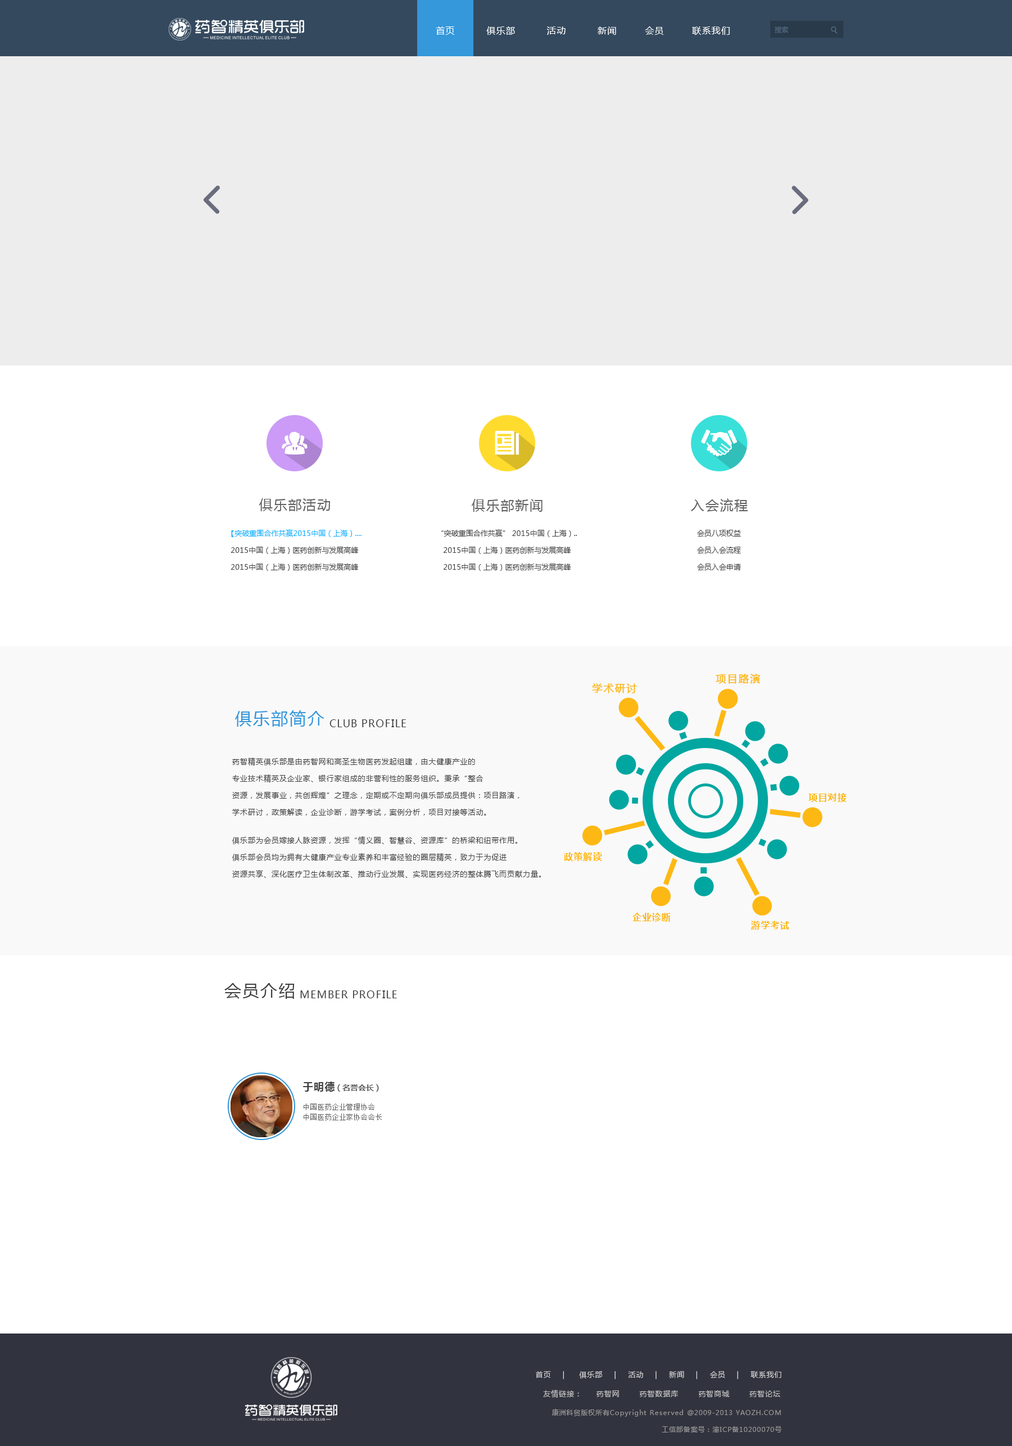
<style>
.page{position:relative;width:1012px;height:1446px;background:#ffffff}
.page>*{position:absolute;margin:0}
.t1{font:9px "MicrosoftYaHei";letter-spacing:0.075em;color:#ffffff}
.t2{font:6.8px "MicrosoftYaHei";color:#526a82}
.t3{font:13.5px "MicrosoftYaHei";letter-spacing:0.075em;color:#626262}
.t4{font:7.3px/16.9px "MicrosoftYaHei";color:#404040}
.t5{font:7.3px/16.9px "MicrosoftYaHei";color:#00aeff}
.t6{font:10.1px "MicrosoftYaHei";letter-spacing:0.075em;color:#fdb813;font-weight:bold}
.t7{font:16.9px "MicrosoftYaHei";letter-spacing:0.075em;color:#3498db}
.t8{font:10.1px "MicrosoftYaHei";letter-spacing:0.075em;color:#404040}
.t9{font:7.3px/16.9px "MicrosoftYaHei";letter-spacing:0.075em;color:#404040}
.t10{font:9px "MicrosoftYaHei-Bold";letter-spacing:0.075em;color:#fdb813}
.t11{font:16.9px "MicrosoftYaHei";letter-spacing:0.075em;color:#404040}
.t12{font:10.1px "MicrosoftYaHei-Bold";letter-spacing:0.075em;color:#404040}
.t13{font:7.9px "MicrosoftYaHei-Bold";color:#606060}
.t14{font:6.8px/10.1px "SimSun";letter-spacing:0.075em;color:#606060}
.t15{font:7.3px "MicrosoftYaHei";letter-spacing:0.075em;color:#d6d6d6}
.t16{font:7.3px "MicrosoftYaHei";letter-spacing:0.075em;color:#c2c2c2}
.t17{font:6.8px/16.9px "MicrosoftYaHei";letter-spacing:0.075em;color:#989898}
</style>
<div class="page">
<p class="t1" style="left:436px;top:26px;width:294px;height:9px">首页         俱乐部         活动         新闻        会员        联系我们</p>
<p class="t2" style="left:775px;top:26px;width:14px;height:7px">搜索</p>
<p class="t3" style="left:259px;top:498px;width:71px;height:13px">俱乐部活动</p>
<p class="t3" style="left:472px;top:499px;width:71px;height:13px">俱乐部新闻</p>
<p class="t3" style="left:691px;top:498px;width:57px;height:14px">入会流程</p>
<p class="t4" style="left:231px;top:529px;width:131px;height:42px;text-align:center"><span class="t5">【突破重围合作共赢2015中国（上海）....<br></span>2015中国（上海）医药创新与发展高峰<br>2015中国（上海）医药创新与发展高峰</p>
<p class="t4" style="left:442px;top:529px;width:135px;height:42px;text-align:center">“突破重围合作共赢” 2015中国（上海）..<br>2015中国（上海）医药创新与发展高峰<br>2015中国（上海）医药创新与发展高峰</p>
<p class="t4" style="left:698px;top:530px;width:43px;height:40px;text-align:center">会员八项权益<br>会员入会流程<br>会员入会申请</p>
<p class="t6" style="left:716px;top:674px;width:44px;height:10px">项目路演</p>
<p class="t6" style="left:592px;top:683px;width:45px;height:11px">学术研讨</p>
<p class="t7" style="left:235px;top:710px;width:90px;height:17px">俱乐部简介</p>
<p class="t8" style="left:330px;top:719px;width:76px;height:8px">CLUB PROFILE</p>
<p class="t9" style="left:232px;top:758px;width:288px;height:58px">药智精英俱乐部是由药智网和高圣生物医药发起组建，由大健康产业的<br>专业技术精英及企业家、银行家组成的非营利性的服务组织。秉承“整合<br>资源，发展事业，共创辉煌”之理念，定期或不定期向俱乐部成员提供：项目路演，<br>学术研讨，政策解读，企业诊断，游学考试，案例分析，项目对接等活动。</p>
<p class="t10" style="left:809px;top:793px;width:38px;height:9px">项目对接</p>
<p class="t9" style="left:232px;top:836px;width:309px;height:42px">俱乐部为会员嫁接人脉资源，发挥“情义圈、智慧谷、资源库”的桥梁和纽带作用。<br>俱乐部会员均为拥有大健康产业专业素养和丰富经验的圈层精英，致力于为促进<br>资源共享、深化医疗卫生体制改革、推动行业发展、实现医药经济的整体腾飞而贡献力量。</p>
<p class="t10" style="left:564px;top:852px;width:38px;height:9px">政策解读</p>
<p class="t10" style="left:633px;top:913px;width:38px;height:9px">企业诊断</p>
<p class="t10" style="left:752px;top:921px;width:38px;height:9px">游学考试</p>
<p class="t11" style="left:224px;top:983px;width:71px;height:16px">会员介绍</p>
<p class="t8" style="left:300px;top:991px;width:97px;height:7px">MEMBER PROFILE</p>
<p class="t12" style="left:303px;top:1082px;width:32px;height:10px">于明德</p>
<p class="t13" style="left:338px;top:1084px;width:41px;height:8px">（名誉会长）</p>
<p class="t14" style="left:304px;top:1104px;width:78px;height:16px">中国医药企业管理协会<br>中国医药企业家协会会长</p>
<p class="t15" style="left:536px;top:1371px;width:246px;height:8px">首页    |     俱乐部    |    活动    |    新闻    |    会员    |    联系我们</p>
<p class="t16" style="left:543px;top:1390px;width:238px;height:8px">友情链接：     药智网       药智数据库       药智商城       药智论坛</p>
<p class="t17" style="left:552px;top:1409px;width:230px;height:24px;text-align:right">康洲科贸版权所有Copyright Reserved @2009-2013 YAOZH.COM<br> 工信部备案号：渝ICP备10200070号</p>
</div>
